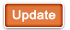
<style>
.page{position:relative;width:70px;height:30px}
.page>*{position:absolute;margin:0}
.t1{font:12px "ArialMT";color:#fcf9f9;font-weight:bold;scale:1.08 1}
</style>
<div class="page">
<p class="t1" style="left:12px;top:10px;width:44px;height:12px">Update</p>
</div>
